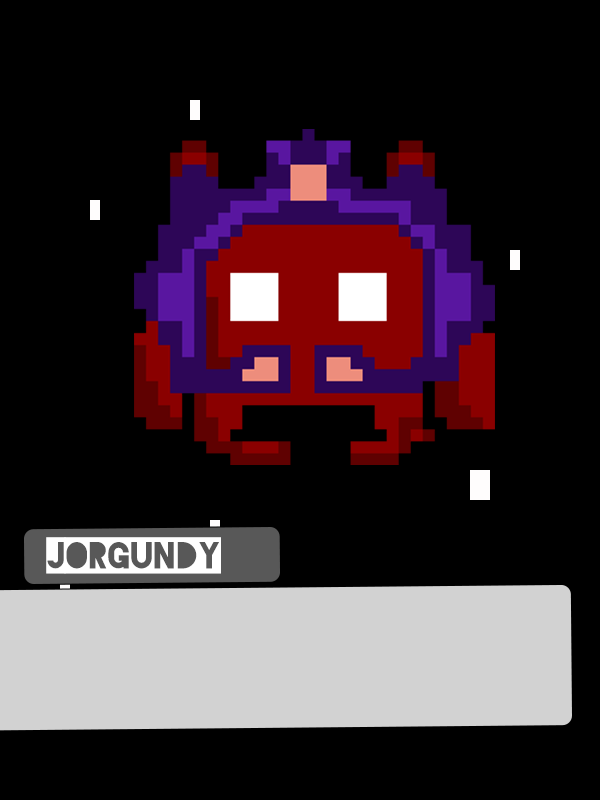
<style>
.page{position:relative;width:600px;height:800px;background:#000000}
.page>*{position:absolute;margin:0}
.t1{font:42.9px "Blackout-2AM";color:#ffffff}
</style>
<div class="page">
<p class="t1" style="left:46px;top:537px;width:175px;height:37px">jorgundy</p>
</div>
